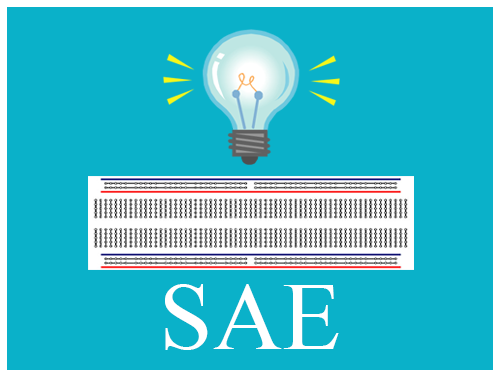
<style>
.page{position:relative;width:500px;height:375px;background:#0ab1c9}
.page>*{position:absolute;margin:0}
.t1{font:96px "TimesNewRomanPSMT";color:#ffffff}
</style>
<div class="page">
<p class="t1" style="left:165px;top:284px;width:174px;height:66px">SAE</p>
</div>
